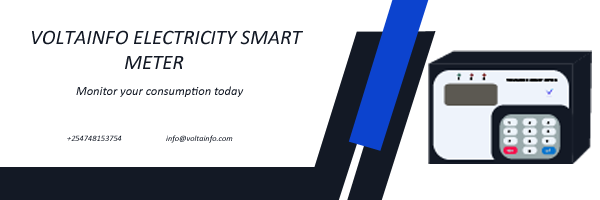
<style>
.page{position:relative;width:600px;height:200px;background:#ffffff}
.page>*{position:absolute;margin:0}
.t1{font:20.8px "Calibri-Italic";color:#131925}
.t2{font:12.5px "Calibri-Italic";color:#131925}
.t3{font:8.3px "Calibri-Italic";color:#131925}
.t4{font:8.3px "Calibri-Italic"}
</style>
<div class="page">
<p class="t1" style="left:32px;top:30px;width:271px;height:39px">VOLTAINFO ELECTRICITY SMART <br>                    METER</p>
<p class="t2" style="left:76px;top:86px;width:168px;height:11px">Monitor your consumption today</p>
<p class="t3" style="left:67px;top:135px;width:55px;height:6px">+254748153754</p>
<p class="t4" style="left:166px;top:135px;width:67px;height:8px">info@voltainfo.com</p>
</div>
